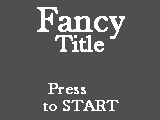
<style>
.page{position:relative;width:160px;height:120px;background:#4f4f4f}
.page>*{position:absolute;margin:0}
.t1{font:36px "BaskOldFace";color:#ffffff;font-weight:bold}
.t2{font:24px "BaskOldFace";color:#ffffff;font-weight:bold}
.t3{font:16px "BaskOldFace";color:#ffffff;font-weight:bold}
</style>
<div class="page">
<p class="t1" style="left:37px;top:7px;width:88px;height:32px">Fancy</p>
<p class="t2" style="left:55px;top:35px;width:49px;height:17px">Title</p>
<p class="t3" style="left:48px;top:83px;width:38px;height:11px">Press</p>
<p class="t3" style="left:43px;top:100px;width:76px;height:11px">to START</p>
</div>
